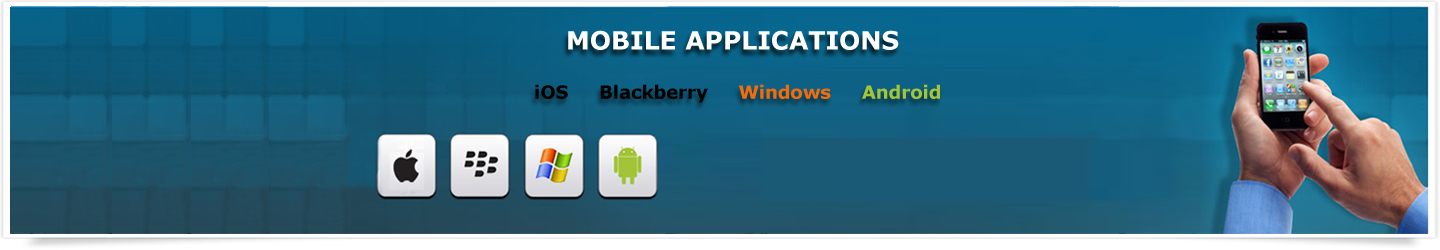
<style>
.page{position:relative;width:1440px;height:250px}
.page>*{position:absolute;margin:0}
.t1{font:25px "Verdana-Bold";color:#ffffff}
.t2{font:18px "Verdana-Bold";color:#000000}
.t3{font:18px "Verdana-Bold";color:#030303}
.t4{font:18px "Verdana-Bold";color:#f46b0a}
.t5{font:18px "Verdana-Bold";color:#a3c436}
</style>
<div class="page">
<p class="t1" style="left:568px;top:30px;width:331px;height:20px">MOBILE APPLICATIONS</p>
<p class="t2" style="left:535px;top:84px;width:405px;height:19px"><span class="t3">iOS     </span>Blackberry     <span class="t4">Windows     </span><span class="t5">Android</span></p>
</div>
